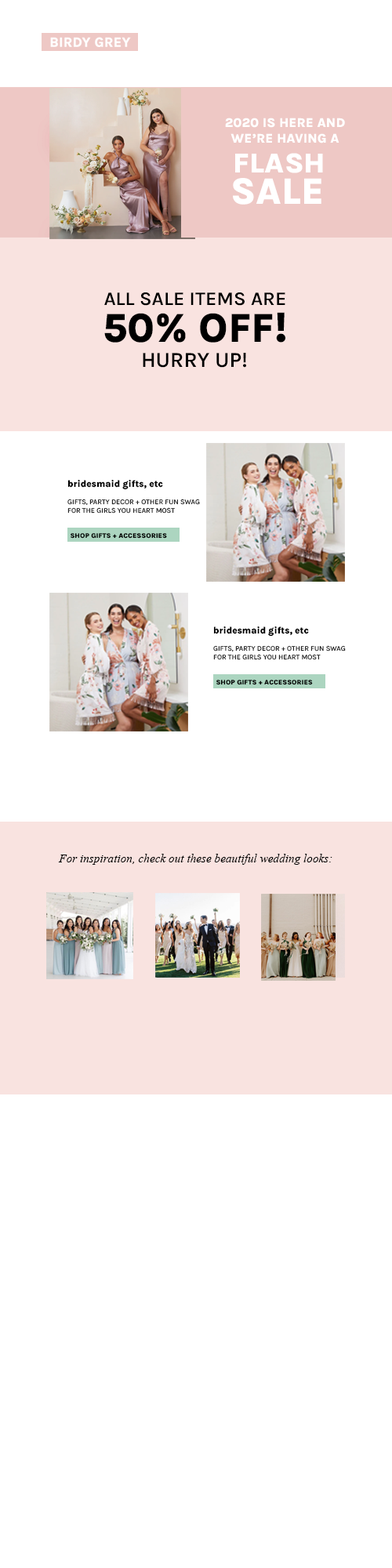
<style>
.page{position:relative;width:392px;height:1568px;background:#ffffff}
.page>*{position:absolute;margin:0}
.t1{font:13px "Karla-ExtraBold";letter-spacing:0.001em;color:#ffffff}
.t2{font:28.1px "Karla-ExtraBold";letter-spacing:0.001em;color:#ffffff;scale:1.03 1}
.t3{font:37.7px "Karla-ExtraBold";letter-spacing:0.001em;color:#ffffff}
.t4{font:19.3px "Karla-SemiBold";letter-spacing:0.001em;color:#000000}
.t5{font:41.5px "Karla-ExtraBold";letter-spacing:0.001em;color:#000000}
.t6{font:21.5px "Karla-SemiBold";letter-spacing:0.001em;color:#000000}
.t7{font:9.5px "Karla-ExtraBold";letter-spacing:0.001em;color:#000000;scale:0.97 1}
.t8{font:7.3px "Karla-Regular";letter-spacing:0.001em}
.t9{font:6.7px "Karla-ExtraBold";letter-spacing:0.001em;color:#000000;scale:1.04 1}
.t10{font:7.3px "Karla-Regular";letter-spacing:0.001em;color:#000000}
.t11{font:11.8px "TimesNewRomanPS-ItalicMT";letter-spacing:0.001em;color:#000000}
</style>
<div class="page">
<p class="t1" style="left:225px;top:118px;width:120px;height:25px;text-align:center">2020 IS HERE AND<br>WE’RE HAVING A</p>
<p class="t2" style="left:235px;top:153px;width:88px;height:20px">FLASH</p>
<p class="t3" style="left:233px;top:178px;width:88px;height:27px">SALE</p>
<p class="t4" style="left:104px;top:292px;width:181px;height:14px">ALL SALE ITEMS ARE</p>
<p class="t5" style="left:104px;top:312px;width:181px;height:31px">50% OFF!</p>
<p class="t6" style="left:143px;top:353px;width:103px;height:15px">HURRY UP!</p>
<p class="t7" style="left:67px;top:480px;width:96px;height:10px">bridesmaid gifts, etc</p>
<p class="t8" style="left:67px;top:499px;width:133px;height:15px">GIFTS, PARTY DECOR + OTHER FUN SWAG<br>FOR THE GIRLS YOU HEART MOST</p>
<p class="t9" style="left:71px;top:533px;width:96px;height:6px">SHOP GIFTS + ACCESSORIES</p>
<p class="t7" style="left:213px;top:626px;width:96px;height:11px">bridesmaid gifts, etc</p>
<p class="t10" style="left:213px;top:645px;width:133px;height:15px">GIFTS, PARTY DECOR + OTHER FUN SWAG<br>FOR THE GIRLS YOU HEART MOST</p>
<p class="t9" style="left:216px;top:680px;width:97px;height:5px">SHOP GIFTS + ACCESSORIES</p>
<p class="t11" style="left:58px;top:854px;width:274px;height:11px">For inspiration, check out these beautiful wedding looks:</p>
</div>
